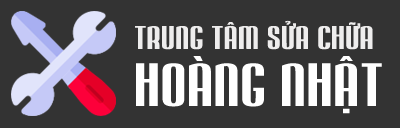
<style>
.page{position:relative;width:400px;height:128px;background:#333333}
.page>*{position:absolute;margin:0}
.t1{font:29.2px "UTM-Mabella";letter-spacing:0.02em;color:#eeeded;scale:1.17 1}
.t2{font:54.2px "UTM-Mabella";letter-spacing:0.02em;color:#ffffff;scale:1.17 1}
</style>
<div class="page">
<p class="t1" style="left:135px;top:20px;width:238px;height:30px">TRUNG TÂM SỬA CHỮA</p>
<p class="t2" style="left:136px;top:56px;width:246px;height:58px">HOÀNG NHẬT</p>
</div>
